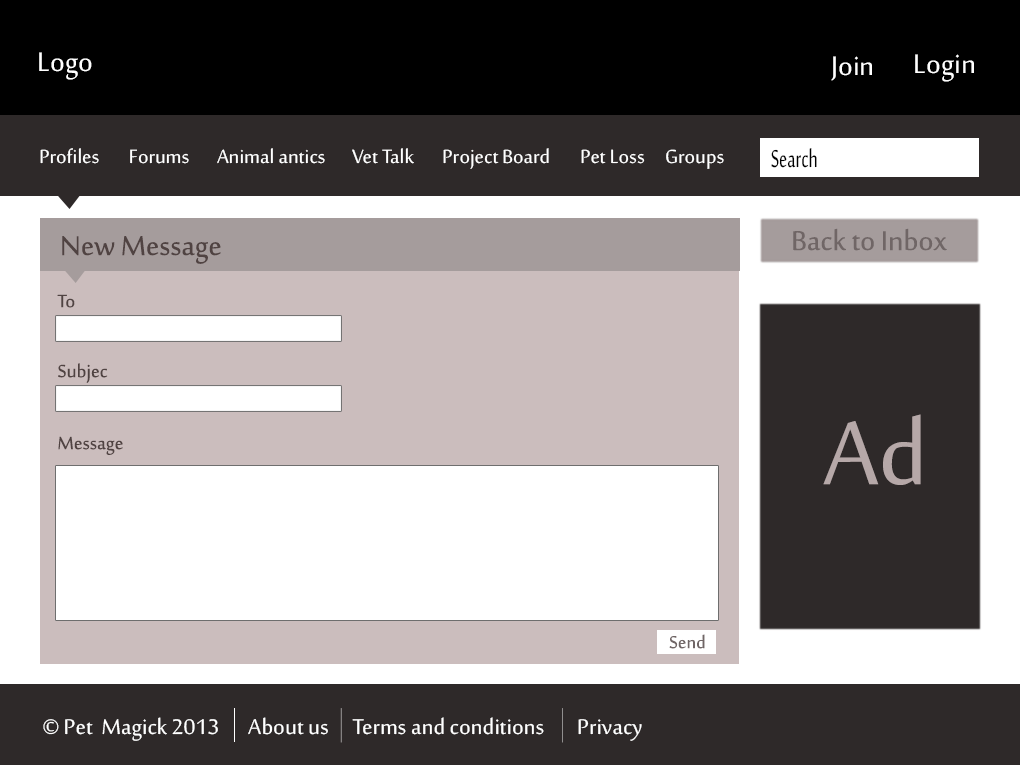
<style>
.page{position:relative;width:1020px;height:765px;background:#ffffff}
.page>*{position:absolute;margin:0}
.t1{font:36.8px "SakkalMajalla";color:#ffffff}
.t2{font:26.2px "SakkalMajalla";color:#ffffff}
.t3{font:33.9px "SakkalMajalla";color:#000000;scale:0.67 1}
.t4{font:37.5px "SakkalMajalla";color:#706666}
.t5{font:37.5px "SakkalMajalla";color:#504342}
.t6{font:24.5px "SakkalMajalla";color:#504342}
.t7{font:123.2px "SakkalMajalla";color:#b6a8a8}
.t8{font:24px "SakkalMajalla";color:#706666}
.t9{font:29.3px "SakkalMajalla";color:#ffffff}
</style>
<div class="page">
<p class="t1" style="left:39px;top:52px;width:53px;height:28px">Logo</p>
<p class="t1" style="left:915px;top:54px;width:59px;height:28px">Login</p>
<p class="t1" style="left:831px;top:56px;width:41px;height:25px">Join</p>
<p class="t2" style="left:40px;top:148px;width:59px;height:16px">Profiles</p>
<p class="t2" style="left:130px;top:149px;width:59px;height:15px">Forums</p>
<p class="t2" style="left:217px;top:148px;width:108px;height:16px">Animal antics</p>
<p class="t2" style="left:352px;top:148px;width:62px;height:16px">Vet Talk</p>
<p class="t2" style="left:443px;top:148px;width:106px;height:21px">Project Board</p>
<p class="t2" style="left:581px;top:149px;width:64px;height:15px">Pet Loss</p>
<p class="t2" style="left:666px;top:149px;width:58px;height:20px">Groups</p>
<p class="t3" style="left:771px;top:148px;width:46px;height:20px">Search</p>
<p class="t4" style="left:793px;top:228px;width:154px;height:23px">Back to Inbox</p>
<p class="t5" style="left:62px;top:236px;width:159px;height:28px">New Message</p>
<p class="t6" style="left:57px;top:294px;width:18px;height:14px">To</p>
<p class="t6" style="left:58px;top:363px;width:50px;height:20px">Subjec</p>
<p class="t7" style="left:823px;top:414px;width:98px;height:71px">Ad</p>
<p class="t6" style="left:58px;top:436px;width:65px;height:19px">Message</p>
<p class="t8" style="left:669px;top:634px;width:36px;height:15px">Send</p>
<p class="t9" style="left:43px;top:717px;width:175px;height:24px">© Pet  Magick 2013</p>
<p class="t9" style="left:248px;top:717px;width:80px;height:18px">About us</p>
<p class="t9" style="left:352px;top:717px;width:192px;height:18px">Terms and conditions</p>
<p class="t9" style="left:578px;top:719px;width:64px;height:22px">Privacy</p>
</div>
